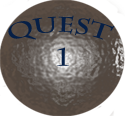
<style>
.page{position:relative;width:125px;height:116px}
.page>*{position:absolute;margin:0}
.t1{font:21.4px "CharlemagneStd-Bold";color:#061f46;scale:1.07 1}
.t2{font:24.9px "CharlemagneStd-Bold";color:#061f46;scale:1.08 1}
</style>
<div class="page">
<p class="t1" style="left:8px;top:15px;width:107px;height:25px">Quest</p>
<p class="t2" style="left:57px;top:47px;width:12px;height:19px">1</p>
</div>
